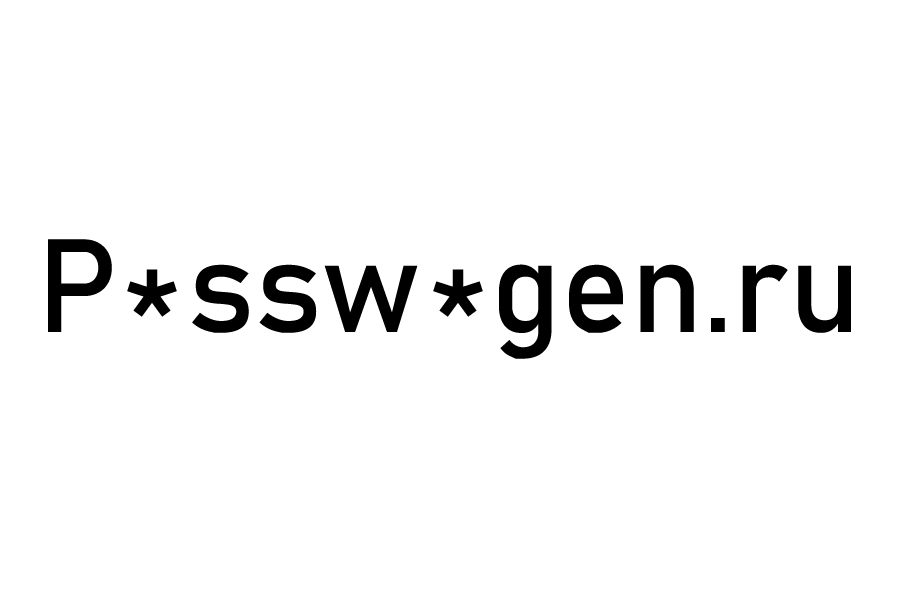
<style>
.page{position:relative;width:900px;height:598px;background:#ffffff}
.page>*{position:absolute;margin:0}
.t1{font:130px "Bahnschrift";color:#000000}
</style>
<div class="page">
<p class="t1" style="left:48px;top:239px;width:803px;height:120px">P  ssw  gen.ru</p>
<p class="t1" style="left:127px;top:269px;width:50px;height:48px">*</p>
<p class="t1" style="left:433px;top:269px;width:50px;height:48px">*</p>
</div>
